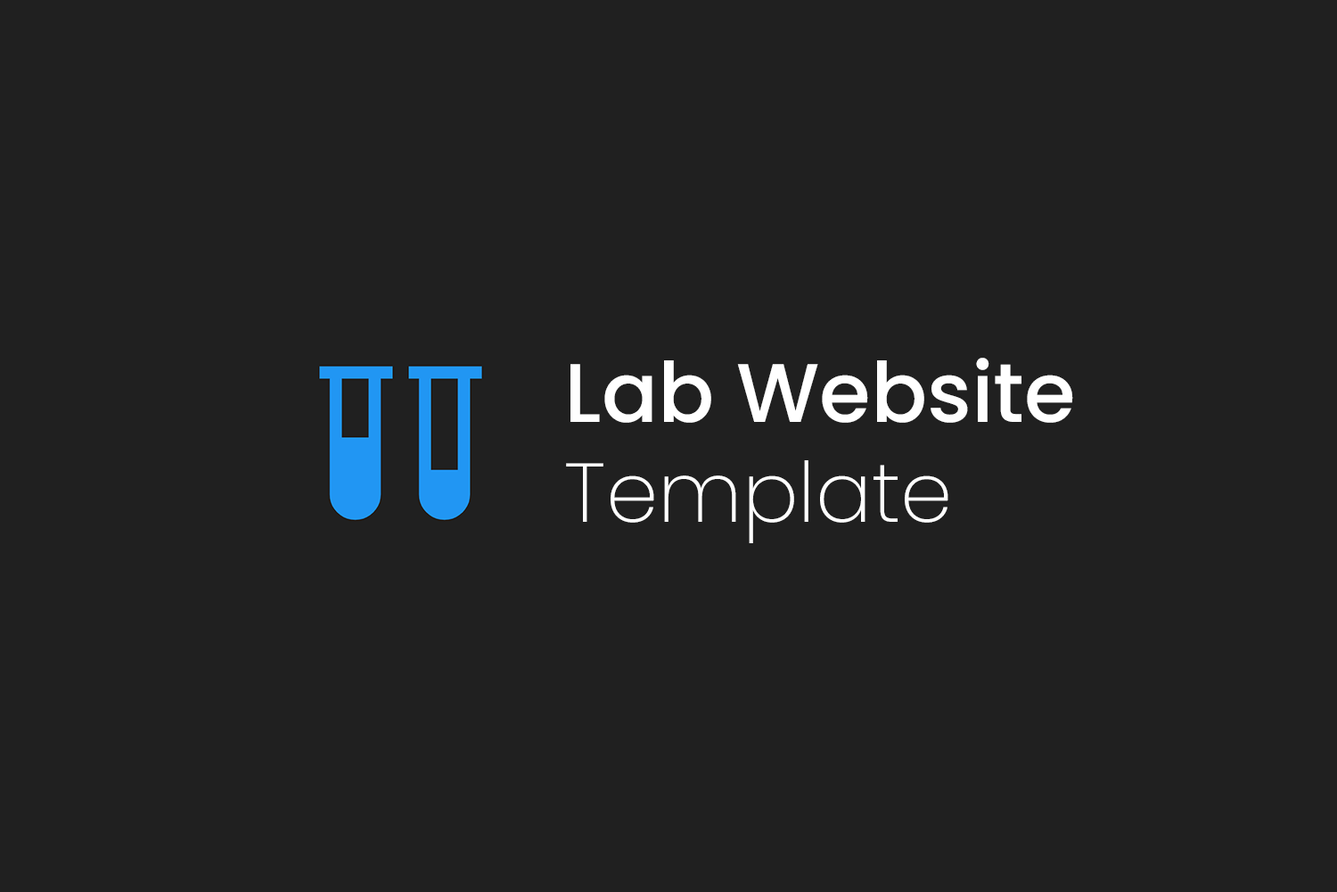
<style>
.page{position:relative;width:1337px;height:892px;background:#202020}
.page>*{position:absolute;margin:0}
.t1{font:83.2px "Poppins-Medium";color:#ffffff}
.t2{font:83.2px "Poppins-ExtraLight";color:#ffffff}
</style>
<div class="page">
<p class="t1" style="left:566px;top:358px;width:507px;height:185px">Lab Website<span class="t2"><br>Template</span></p>
</div>
